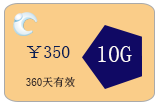
<style>
.page{position:relative;width:159px;height:105px;background:#facd89}
.page>*{position:absolute;margin:0}
.t1{font:18px "SimSun";color:#091e54}
.t2{font:24px "SimSun";color:#fef9f9}
.t3{font:11px "SimSun";color:#352a2a}
</style>
<div class="page">
<p class="t1" style="left:26px;top:46px;width:44px;height:12px">￥350</p>
<p class="t2" style="left:98px;top:46px;width:34px;height:16px">10G</p>
<p class="t3" style="left:26px;top:76px;width:49px;height:12px">360天有效</p>
</div>
